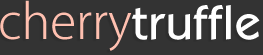
<style>
.page{position:relative;width:263px;height:55px;background:#333333}
.page>*{position:absolute;margin:0}
.t1{font:48px "ATCMapleMedium";letter-spacing:0.025em;color:#ffffff}
.t2{font:48px "KozGoPro-Light";color:#ffc0b0}
</style>
<div class="page">
<p class="t1" style="left:0px;top:0px;width:260px;height:51px"><span class="t2">cherry</span>truffle</p>
</div>
